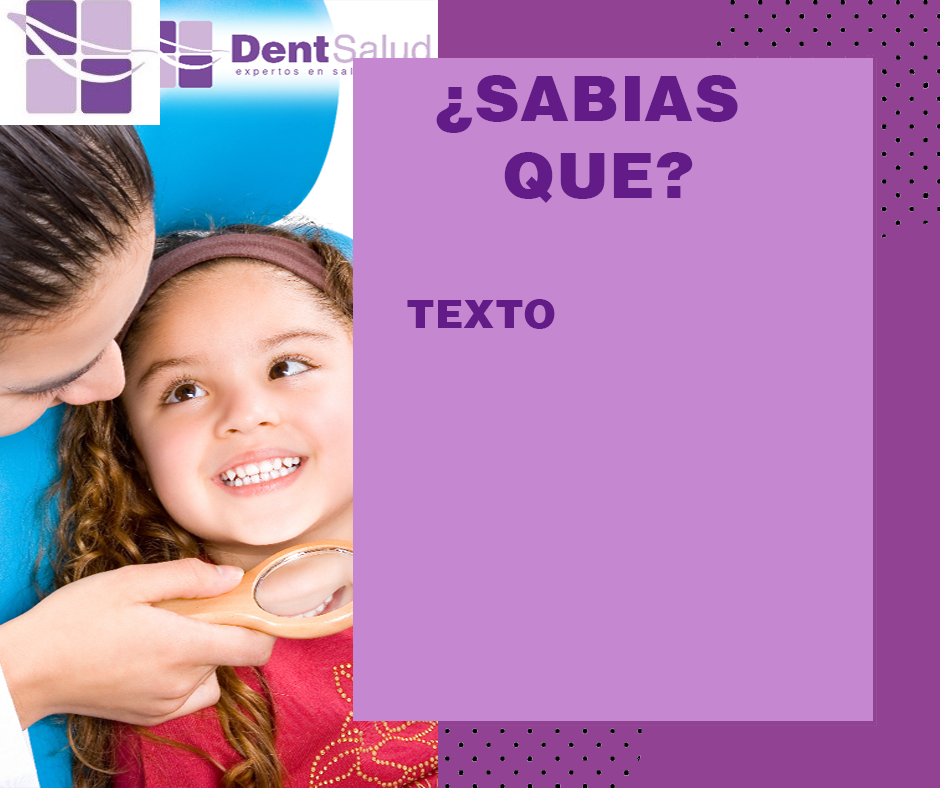
<style>
.page{position:relative;width:940px;height:788px;background:#c588d0}
.page>*{position:absolute;margin:0}
.t1{font:64px "Helvetica-Black";color:#631c87}
.t2{font:40px "Helvetica-Black";color:#631c87}
</style>
<div class="page">
<p class="t1" style="left:436px;top:75px;width:302px;height:128px;text-align:center">¿SABIAS <br>QUE?</p>
<p class="t2" style="left:407px;top:299px;width:148px;height:30px">TEXTO</p>
</div>
